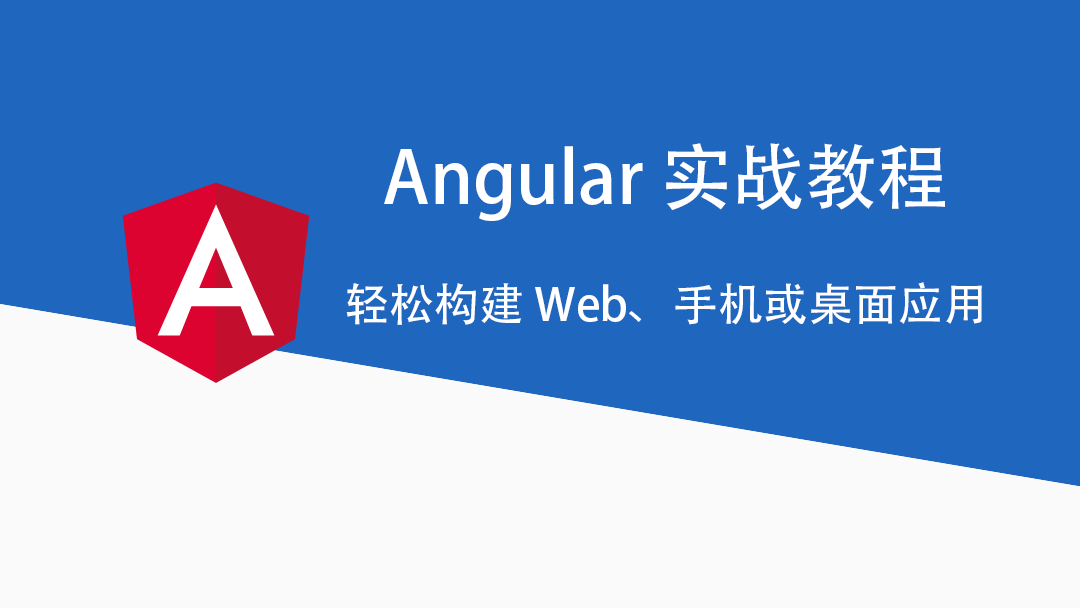
<style>
.page{position:relative;width:1080px;height:608px;background:#1f67be}
.page>*{position:absolute;margin:0}
.t1{font:72px "AdobeHeitiStd-Regular";color:#ffffff}
.t2{font:45px "AdobeHeitiStd-Regular";color:#ffffff}
</style>
<div class="page">
<p class="t1" style="left:384px;top:143px;width:561px;height:78px">Angular实战教程</p>
<p class="t2" style="left:346px;top:282px;width:636px;height:43px">轻松构建 Web、手机或桌面应用</p>
</div>
